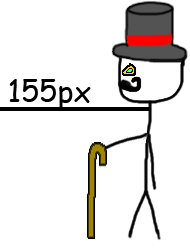
<style>
.page{position:relative;width:190px;height:249px;background:#ffffff}
.page>*{position:absolute;margin:0}
.t1{font:30px "ComicSansMS";color:#000000}
</style>
<div class="page">
<p class="t1" style="left:9px;top:79px;width:82px;height:32px">155px</p>
</div>
